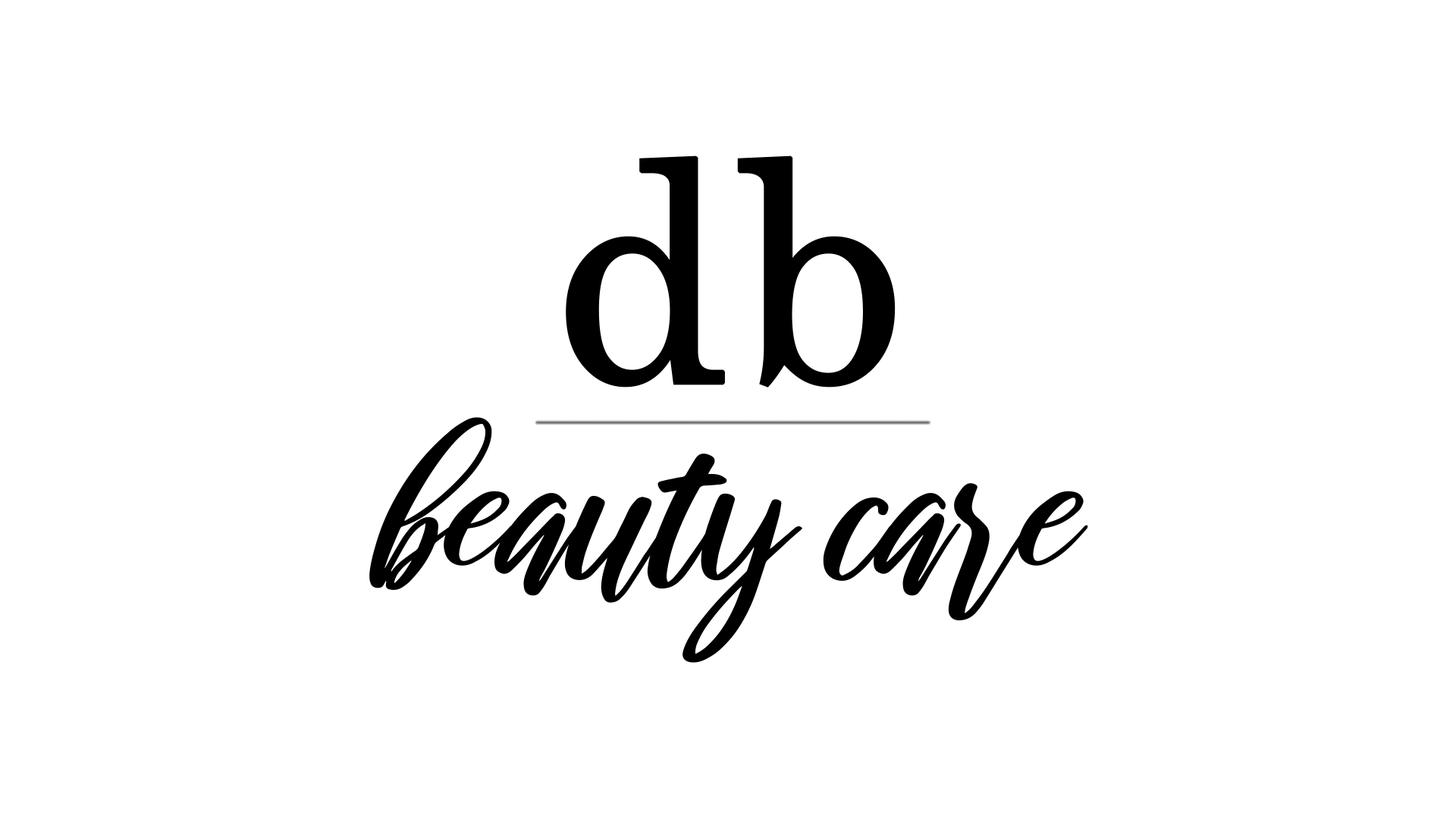
<style>
.page{position:relative;width:1456px;height:819px;background:#ffffff}
.page>*{position:absolute;margin:0}
.t1{font:308.2px "Century";color:#000000;font-weight:bold}
.t2{font:210.3px "raustila-Regular";color:#000000;font-style:italic}
</style>
<div class="page">
<p class="t1" style="left:566px;top:155px;width:330px;height:233px">db</p>
<p class="t2" style="left:369px;top:417px;width:719px;height:246px">beauty care</p>
</div>
